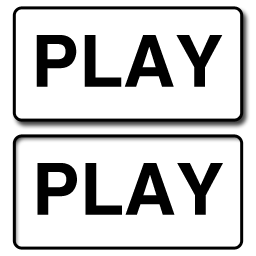
<style>
.page{position:relative;width:256px;height:256px;background:#ffffff}
.page>*{position:absolute;margin:0}
.t1{font:72px "Helvetica-Bold";color:#000000}
</style>
<div class="page">
<p class="t1" style="left:36px;top:35px;width:187px;height:52px">PLAY</p>
<p class="t1" style="left:37px;top:163px;width:186px;height:52px">PLAY</p>
</div>
